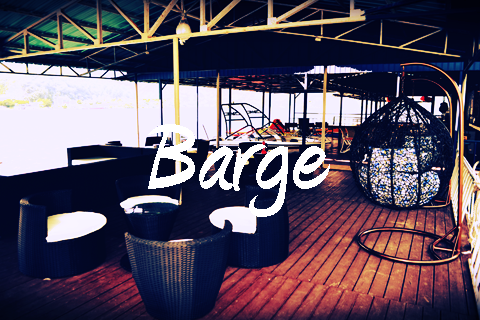
<style>
.page{position:relative;width:480px;height:320px}
.page>*{position:absolute;margin:0}
.t1{font:128px "Amienne-Bold";color:#ffffff}
</style>
<div class="page">
<p class="t1" style="left:148px;top:124px;width:182px;height:93px">Barge</p>
</div>
